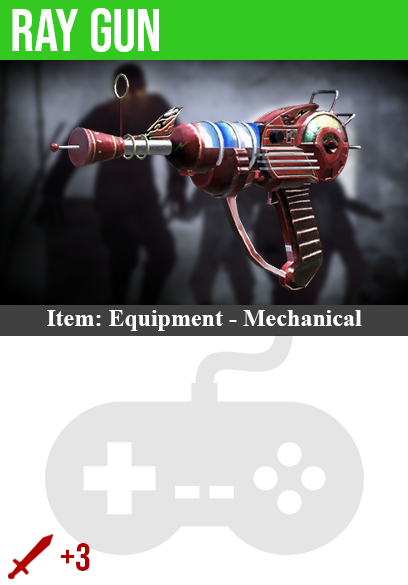
<style>
.page{position:relative;width:408px;height:585px;background:#ffffff}
.page>*{position:absolute;margin:0}
.t1{font:60px "BebasNeue-Regular";color:#ffffff}
.t2{font:24px "TimesNewRomanPS-BoldMT";color:#ffffff}
.t3{font:40px "BebasNeue-Regular";color:#af0202}
</style>
<div class="page">
<p class="t1" style="left:12px;top:8px;width:147px;height:44px">ray gun</p>
<p class="t2" style="left:47px;top:310px;width:315px;height:21px">Item: Equipment - Mechanical</p>
<p class="t3" style="left:60px;top:543px;width:30px;height:28px">+3</p>
</div>
